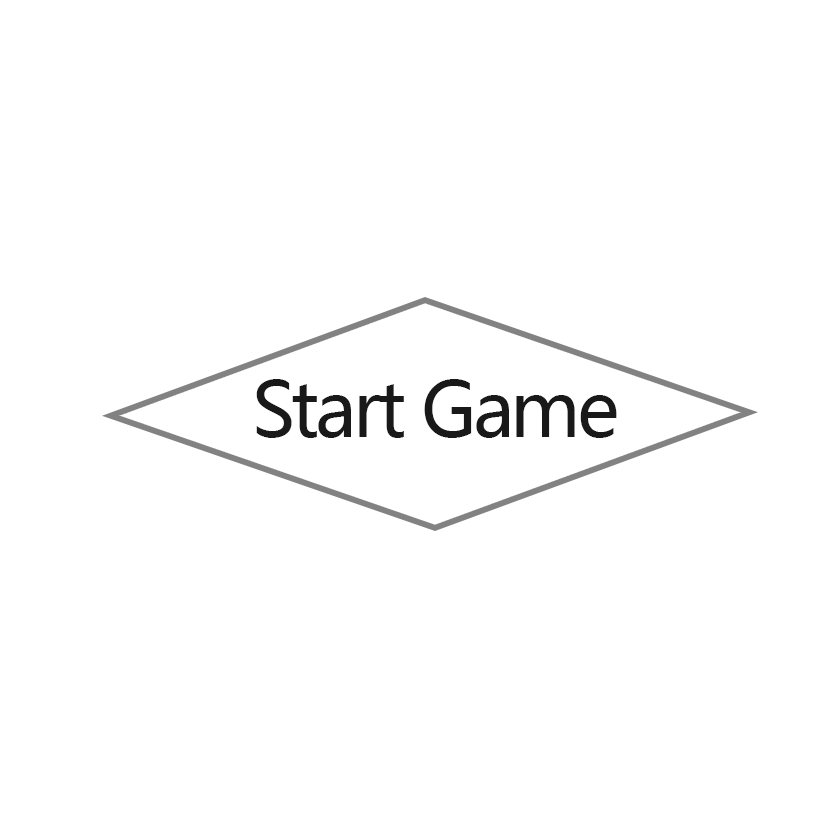
<style>
.page{position:relative;width:827px;height:827px;background:#ffffff}
.page>*{position:absolute;margin:0}
.t1{font:75px "MicrosoftYaHei";letter-spacing:-0.05em;color:#1a1919}
</style>
<div class="page">
<p class="t1" style="left:256px;top:379px;width:361px;height:59px">Start Game</p>
</div>
